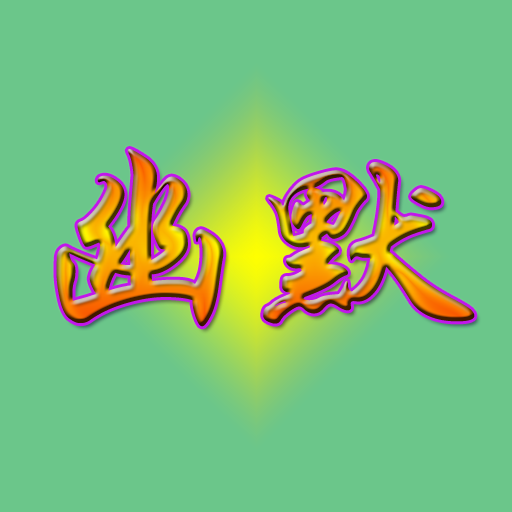
<style>
.page{position:relative;width:512px;height:512px;background:#6bc68a}
.page>*{position:absolute;margin:0}
.t1{font:225px "STXingkai"}
</style>
<div class="page">
<p class="t1" style="left:56px;top:149px;width:419px;height:178px">幽默</p>
</div>
